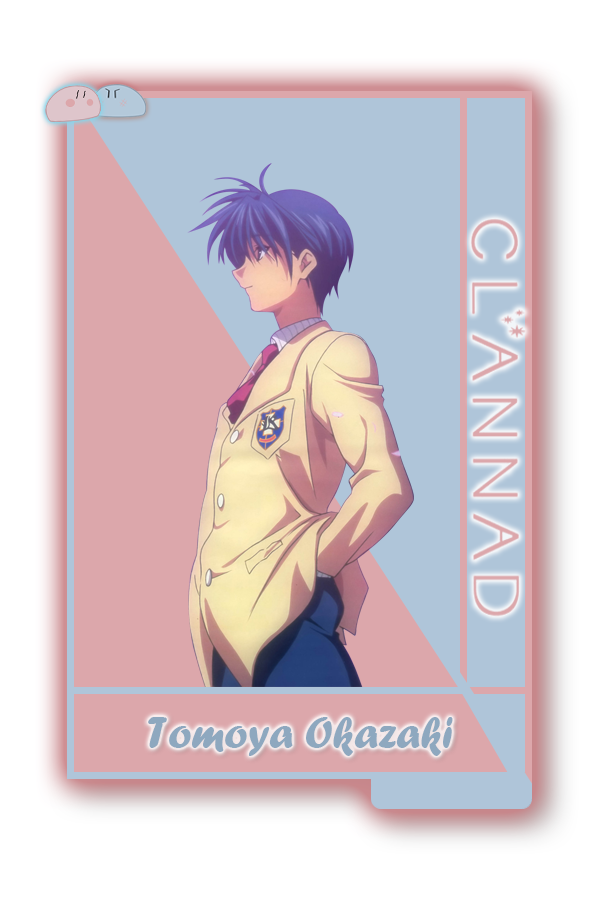
<style>
.page{position:relative;width:600px;height:900px;background:#ffffff}
.page>*{position:absolute;margin:0}
.t1{font:45.8px "ForteMT";color:#8ea8bf;scale:0.94 1}
</style>
<div class="page">
<p class="t1" style="left:148px;top:717px;width:305px;height:39px">Tomoya Okazaki</p>
</div>
